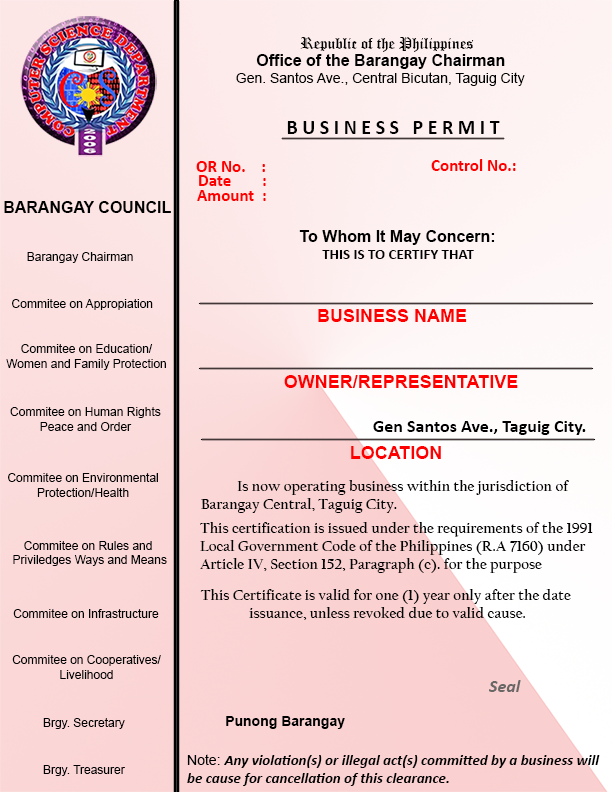
<style>
.page{position:relative;width:612px;height:792px}
.page>*{position:absolute;margin:0}
.t1{font:16px "OldEnglishTextMT";color:#000000}
.t2{font:16px "Arial-BoldMT";color:#000000}
.t3{font:14px "ArialMT";color:#000000}
.t4{font:20px "Calibri-Bold";color:#000000}
.t5{font:17px "Calibri-Bold";color:#ff0000}
.t6{font:12px "ArialMT";color:#000000}
.t7{font:15px "Calibri-Bold";color:#000000}
.t8{font:18px "Arial-BoldMT";color:#ff0000}
.t9{font:3.2px "ArialMT";color:#000000}
.t10{font:18px "Calibri-Bold";color:#000000}
.t11{font:15px "CalifornianFB-Bold";color:#000000}
.t12{font:18px "Calibri-BoldItalic";color:#6a6767}
.t13{font:14px "Arial-BoldMT";color:#000000}
.t14{font:15px "Calibri-BoldItalic";color:#000000}
</style>
<div class="page">
<p class="t1" style="left:300px;top:37px;width:174px;height:15px">Republic of the Philippines</p>
<p class="t2" style="left:256px;top:54px;width:249px;height:15px">Office of the Barangay Chairman</p>
<p class="t3" style="left:236px;top:72px;width:289px;height:14px">Gen. Santos Ave., Central Bicutan, Taguig City</p>
<p class="t4" style="left:287px;top:121px;width:213px;height:13px">B U S I N E S S   P E R M I T</p>
<p class="t5" style="left:196px;top:161px;width:69px;height:11px">OR No.    :</p>
<p class="t5" style="left:431px;top:159px;width:85px;height:12px">Control No.:</p>
<p class="t5" style="left:199px;top:175px;width:67px;height:11px">Date        :</p>
<p class="t5" style="left:197px;top:190px;width:69px;height:11px">Amount  :</p>
<p class="t2" style="left:4px;top:201px;width:167px;height:12px">BARANGAY COUNCIL</p>
<p class="t2" style="left:299px;top:230px;width:196px;height:15px">To Whom It May Concern:</p>
<p class="t6" style="left:27px;top:252px;width:106px;height:11px">Barangay Chairman</p>
<p class="t7" style="left:322px;top:250px;width:152px;height:9px">THIS IS TO CERTIFY THAT</p>
<p class="t6" style="left:12px;top:299px;width:141px;height:11px">Commitee on Appropiation</p>
<p class="t8" style="left:318px;top:309px;width:149px;height:13px">BUSINESS NAME</p>
<p class="t6" style="left:6px;top:344px;width:160px;height:26px;text-align:center">Commitee on Education/<br>Women and Family Protection</p>
<p class="t8" style="left:284px;top:375px;width:234px;height:13px">OWNER/REPRESENTATIVE</p>
<p class="t9" style="left:10px;top:407px;width:151px;height:24px;text-align:center">Commitee on Human Rights<br>Peace and Order</p>
<p class="t10" style="left:373px;top:421px;width:213px;height:14px">Gen Santos Ave., Taguig City.</p>
<p class="t8" style="left:351px;top:446px;width:90px;height:13px">LOCATION</p>
<p class="t9" style="left:8px;top:473px;width:150px;height:24px;text-align:center">Commitee on Environmental<br>Protection/Health</p>
<p class="t11" style="left:201px;top:480px;width:368px;height:33px">Is now operating business within the jurisdiction of <br>Barangay Central, Taguig City.</p>
<p class="t11" style="left:200px;top:522px;width:393px;height:51px">This certification is issued under the requirements of the 1991<br>Local Government Code of the Philippines (R.A 7160) under <br>Article IV, Section 152, Paragraph (c). for the purpose</p>
<p class="t9" style="left:13px;top:541px;width:154px;height:25px;text-align:center">Commitee on Rules and <br>Priviledges Ways and Means</p>
<p class="t11" style="left:200px;top:589px;width:371px;height:31px;text-align:center">This Certificate is valid for one (1) year only after the date <br>issuance, unless revoked due to valid cause.</p>
<p class="t9" style="left:13px;top:609px;width:146px;height:9px;text-align:center">Commitee on Infrastructure</p>
<p class="t9" style="left:12px;top:655px;width:149px;height:24px;text-align:center">Commitee on Cooperatives/<br>Livelihood</p>
<p class="t12" style="left:489px;top:680px;width:32px;height:12px">Seal</p>
<p class="t9" style="left:43px;top:718px;width:82px;height:11px;text-align:center">Brgy. Secretary</p>
<p class="t13" style="left:226px;top:716px;width:119px;height:13px">Punong Barangay</p>
<p class="t14" style="left:187px;top:754px;width:413px;height:32px"><span class="t3">Note: </span>Any violation(s) or illegal act(s) committed by a business will <br>be cause for cancellation of this clearance.</p>
<p class="t9" style="left:43px;top:765px;width:82px;height:11px;text-align:center">Brgy. Treasurer</p>
</div>
